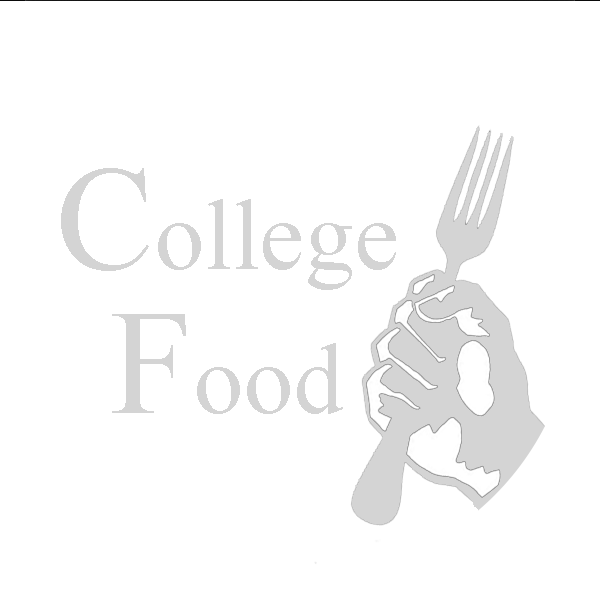
<style>
.page{position:relative;width:600px;height:600px;background:#ffffff}
.page>*{position:absolute;margin:0}
.t1{font:100px/48px "TimesNewRomanPSMT";color:#d4d4d4}
.t2{font:150px/48px "TimesNewRomanPSMT";color:#d4d4d4}
</style>
<div class="page">
<p class="t1" style="left:61px;top:167px;width:335px;height:246px;text-align:center"><span class="t2">C</span>ollege <br><br><span class="t2"><br>F</span>ood</p>
</div>
